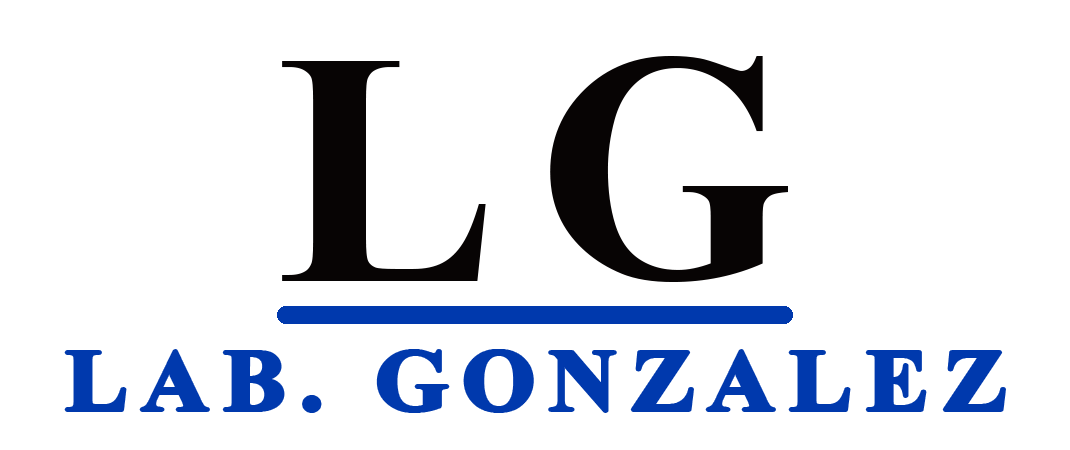
<style>
.page{position:relative;width:1070px;height:450px;background:#ffffff}
.page>*{position:absolute;margin:0}
.t1{font:332.2px "TimesNewRomanPS-BoldMT";letter-spacing:0.15em;color:#070404}
.t2{font:327.1px "TimesNewRomanPS-BoldMT";letter-spacing:0.15em;color:#070404}
.t3{font:86.6px "TimesNewRomanPS-BoldMT";letter-spacing:0.15em;color:#0039ad;scale:1.08 1}
</style>
<div class="page">
<p class="t1" style="left:282px;top:61px;width:204px;height:220px">L</p>
<p class="t2" style="left:550px;top:56px;width:238px;height:226px">G</p>
<p class="t3" style="left:66px;top:351px;width:938px;height:60px">LAB. GONZALEZ</p>
</div>
